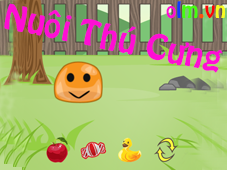
<style>
.page{position:relative;width:227px;height:170px}
.page>*{position:absolute;margin:0}
.t1{font:30.7px "VNI-Hobo";color:#fe0ed4;scale:1.08 1}
</style>
<div class="page">
<p class="t1" style="left:4px;top:3px;width:219px;height:70px;rotate:12deg">Nuoâi Thuù Cöng</p>
</div>
